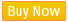
<style>
.page{position:relative;width:68px;height:22px;background:#ffffff}
.page>*{position:absolute;margin:0}
.t1{font:14px "HelveticaNeueLTStd-Cn";letter-spacing:0.04em;color:#ffffff}
.t2{font:14px "Tahoma";letter-spacing:0.04em;color:#ffffff}
</style>
<div class="page">
<p class="t1" style="left:8px;top:6px;width:52px;height:13px">Buy N<span class="t2">ow</span></p>
</div>
